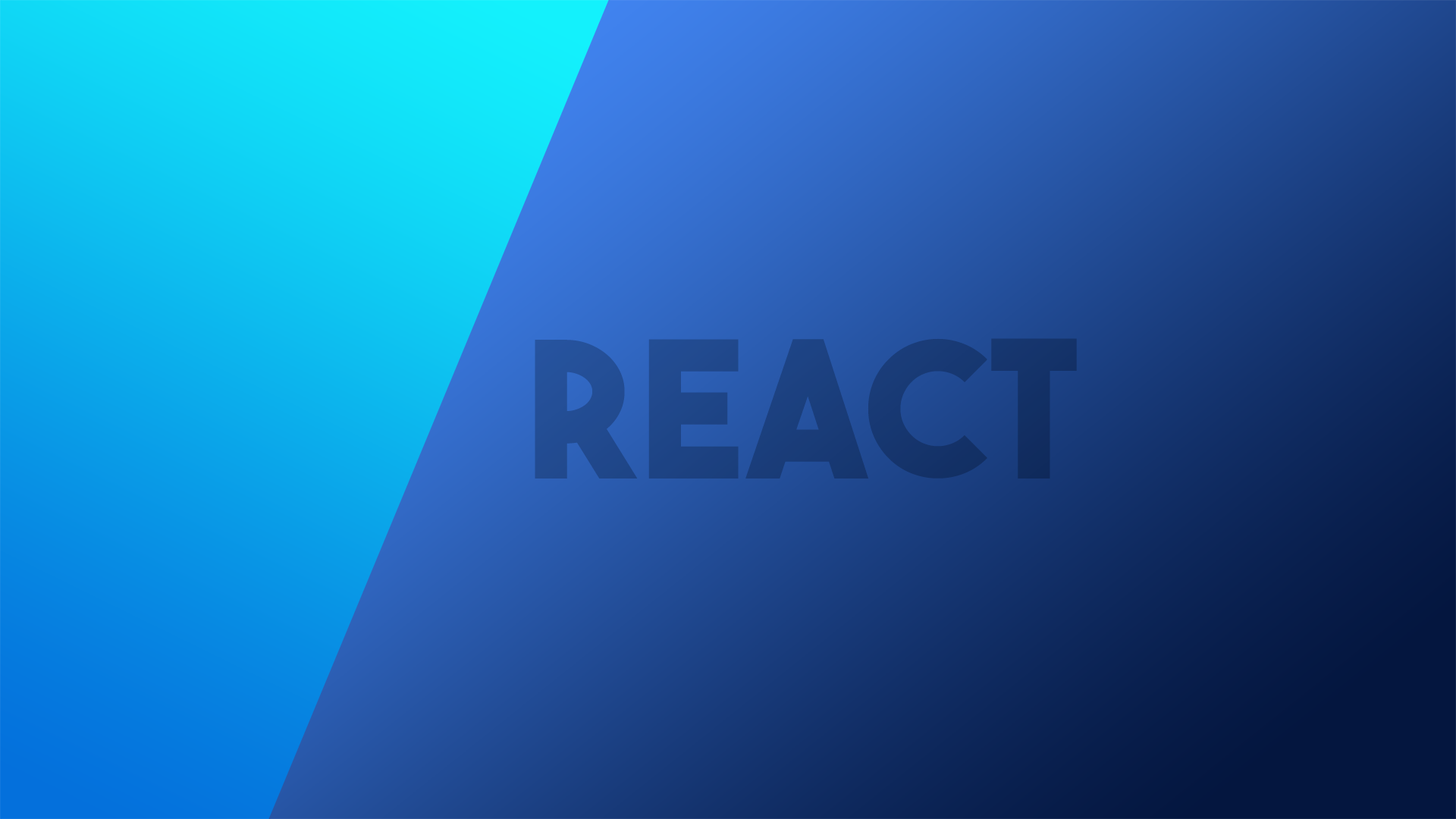
<style>
.page{position:relative;width:1456px;height:819px}
.page>*{position:absolute;margin:0}
.t1{font:189.6px "TheBoldFont";color:#1b407f}
</style>
<div class="page">
<p class="t1" style="left:535px;top:338px;width:542px;height:141px">react</p>
</div>
